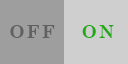
<style>
.page{position:relative;width:128px;height:64px;background:#cfcfcf}
.page>*{position:absolute;margin:0}
.t1{font:18px "CenturySchoolbook-Bold";letter-spacing:0.12em;color:#616161}
.t2{font:18px "CenturySchoolbook-Bold";letter-spacing:0.12em;color:#22a818}
</style>
<div class="page">
<p class="t1" style="left:10px;top:25px;width:45px;height:13px">OFF</p>
<p class="t2" style="left:82px;top:25px;width:32px;height:13px">ON</p>
</div>
